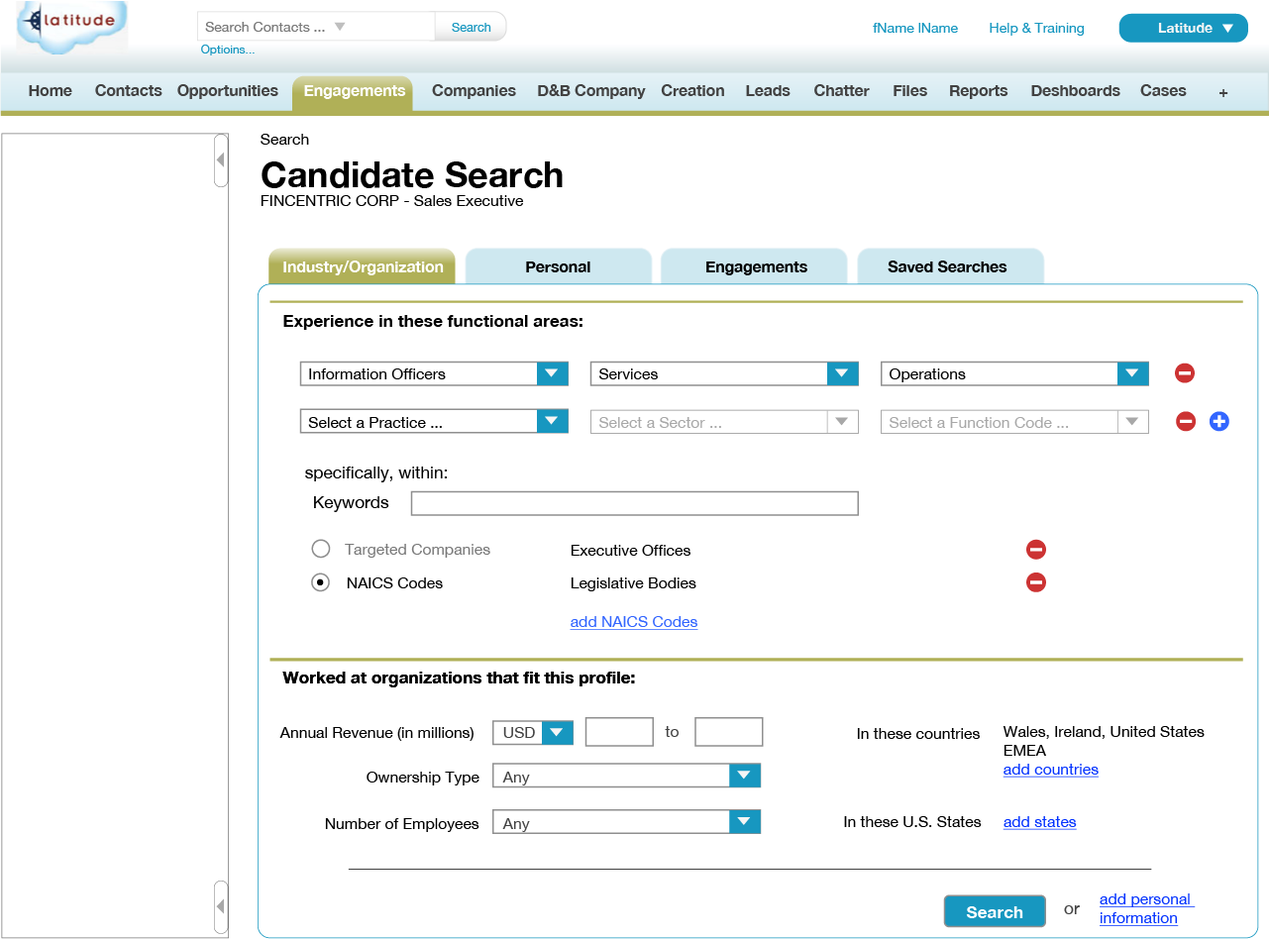
<style>
.page{position:relative;width:1269px;height:939px;background:#ffffff}
.page>*{position:absolute;margin:0}
.t1{font:14px "HelveticaNeue-Roman";color:#797979}
.t2{font:12.5px "HelveticaNeue-Roman";color:#1797c0}
.t3{font:14px "HelveticaNeue-Roman";color:#1797c0}
.t4{font:14px "HelveticaNeue-Bold";color:#f5f5f5}
.t5{font:11.9px "HelveticaNeue-Roman";color:#1797c0}
.t6{font:15.5px "HelveticaNeue-Bold";color:#424242}
.t7{font:15.5px "HelveticaNeue-Bold";color:#ffffff}
.t8{font:15.5px "HelveticaNeue-Roman";color:#000000}
.t9{font:35.7px "HelveticaNeue-Bold";color:#000000}
.t10{font:15.5px "HelveticaNeue-Bold";color:#000000}
.t11{font:17.1px "HelveticaNeue-Bold";color:#000000}
.t12{font:15.5px "HelveticaNeue-Roman";color:#a8a8a8}
.t13{font:17.1px "HelveticaNeue-Roman";color:#000000}
.t14{font:15.5px "HelveticaNeue-Roman";color:#797979}
.t15{font:15.5px "HelveticaNeue-Roman";color:#3366ff;text-decoration:underline}
.t16{font:15.5px "HelveticaNeue-Roman";color:#424242}
.t17{font:15.5px "HelveticaNeue-Roman";color:#0433ff;text-decoration:underline}
.t18{font:17.1px "HelveticaNeue-Roman";color:#424242}
.t19{font:17.1px "HelveticaNeue-Bold";color:#ffffff}
</style>
<div class="page">
<p class="t1" style="left:205px;top:22px;width:120px;height:10px">Search Contacts ...</p>
<p class="t2" style="left:452px;top:23px;width:39px;height:9px">Search</p>
<p class="t3" style="left:873px;top:23px;width:211px;height:13px">fName lName        Help &amp; Training</p>
<p class="t4" style="left:1158px;top:23px;width:55px;height:10px">Latitude</p>
<p class="t5" style="left:201px;top:45px;width:54px;height:10px">Optioins...</p>
<p class="t6" style="left:29px;top:85px;width:43px;height:11px">Home</p>
<p class="t6" style="left:95px;top:84px;width:68px;height:12px">Contacts</p>
<p class="t6" style="left:177px;top:84px;width:101px;height:15px">Opportunities</p>
<p class="t7" style="left:304px;top:85px;width:102px;height:14px">Engagements</p>
<p class="t6" style="left:432px;top:84px;width:84px;height:15px">Companies</p>
<p class="t6" style="left:538px;top:84px;width:108px;height:15px">D&amp;B Company</p>
<p class="t6" style="left:661px;top:84px;width:63px;height:12px">Creation</p>
<p class="t6" style="left:746px;top:85px;width:45px;height:11px">Leads</p>
<p class="t6" style="left:815px;top:84px;width:55px;height:12px">Chatter</p>
<p class="t6" style="left:894px;top:85px;width:34px;height:11px">Files</p>
<p class="t6" style="left:950px;top:85px;width:59px;height:14px">Reports</p>
<p class="t6" style="left:1032px;top:85px;width:89px;height:11px">Deshboards</p>
<p class="t6" style="left:1141px;top:84px;width:46px;height:12px">Cases</p>
<p class="t6" style="left:1220px;top:89px;width:9px;height:8px">+</p>
<p class="t8" style="left:261px;top:134px;width:302px;height:72px">Search<br><span class="t9">Candidate Search<br></span>FINCENTRIC CORP - Sales Executive</p>
<p class="t7" style="left:283px;top:261px;width:161px;height:14px">Industry/Organization</p>
<p class="t10" style="left:526px;top:262px;width:65px;height:11px">Personal</p>
<p class="t10" style="left:707px;top:262px;width:101px;height:13px">Engagements</p>
<p class="t10" style="left:888px;top:261px;width:120px;height:12px">Saved Searches</p>
<p class="t11" style="left:283px;top:315px;width:300px;height:15px">Experience in these functional areas:</p>
<p class="t8" style="left:309px;top:369px;width:137px;height:11px">Information Officers</p>
<p class="t8" style="left:600px;top:369px;width:58px;height:11px">Services</p>
<p class="t8" style="left:890px;top:369px;width:76px;height:13px">Operations</p>
<p class="t8" style="left:308px;top:417px;width:134px;height:11px">Select a Practice ...</p>
<p class="t12" style="left:600px;top:417px;width:121px;height:11px">Select a Sector ...</p>
<p class="t12" style="left:890px;top:417px;width:179px;height:11px">Select a Function Code ...</p>
<p class="t13" style="left:305px;top:467px;width:142px;height:16px">speciﬁcally, within:</p>
<p class="t13" style="left:314px;top:496px;width:75px;height:16px">Keywords</p>
<p class="t14" style="left:345px;top:544px;width:146px;height:14px">Targeted Companies</p>
<p class="t8" style="left:571px;top:545px;width:120px;height:11px">Executive Offices</p>
<p class="t8" style="left:347px;top:578px;width:96px;height:11px">NAICS Codes</p>
<p class="t8" style="left:571px;top:578px;width:126px;height:14px">Legislative Bodies</p>
<p class="t15" style="left:570px;top:616px;width:129px;height:14px">add NAICS Codes</p>
<p class="t11" style="left:282px;top:672px;width:353px;height:16px">Worked at organizations that fit this profile:</p>
<p class="t11" style="left:282px;top:672px;width:353px;height:16px">Worked at organizations that fit this profile:</p>
<p class="t8" style="left:279px;top:727px;width:195px;height:14px">Annual Revenue (in millions)</p>
<p class="t16" style="left:503px;top:727px;width:32px;height:11px">USD</p>
<p class="t16" style="left:665px;top:726px;width:14px;height:11px">to</p>
<p class="t8" style="left:857px;top:728px;width:123px;height:11px">In these countries</p>
<p class="t8" style="left:1003px;top:726px;width:202px;height:30px">Wales, Ireland, United States<br>EMEA</p>
<p class="t8" style="left:367px;top:772px;width:113px;height:14px">Ownership Type</p>
<p class="t16" style="left:502px;top:772px;width:28px;height:14px">Any</p>
<p class="t17" style="left:1003px;top:764px;width:96px;height:14px">add countries</p>
<p class="t8" style="left:325px;top:818px;width:155px;height:14px">Number of Employees</p>
<p class="t16" style="left:502px;top:818px;width:28px;height:14px">Any</p>
<p class="t8" style="left:844px;top:817px;width:138px;height:10px">In these U.S. States</p>
<p class="t17" style="left:1003px;top:817px;width:74px;height:13px">add states</p>
<p class="t17" style="left:1100px;top:894px;width:96px;height:14px">add personal</p>
<p class="t18" style="left:1064px;top:906px;width:16px;height:9px">or</p>
<p class="t19" style="left:966px;top:907px;width:58px;height:12px">Search</p>
<p class="t17" style="left:1100px;top:913px;width:79px;height:14px">information</p>
</div>
